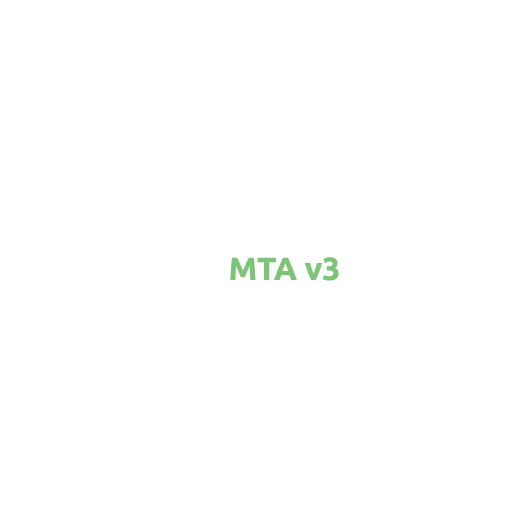
<style>
.page{position:relative;width:512px;height:512px;background:#ffffff}
.page>*{position:absolute;margin:0}
.t1{font:32px "Ubuntu-Bold";color:#7cc576}
.t2{font:32px "Ubuntu-Bold";color:#ffffff}
</style>
<div class="page">
<p class="t1" style="left:173px;top:257px;width:166px;height:24px"><span class="t2">See</span>MTA v3</p>
</div>
